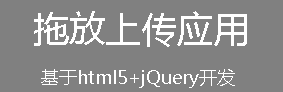
<style>
.page{position:relative;width:283px;height:92px;background:#808080}
.page>*{position:absolute;margin:0}
.t1{font:36px "MicrosoftYaHei";color:#ffffff}
.t2{font:18px "MicrosoftYaHei";color:#ffffff}
</style>
<div class="page">
<p class="t1" style="left:34px;top:11px;width:213px;height:36px">拖放上传应用</p>
<p class="t2" style="left:41px;top:69px;width:194px;height:19px">基于html5+jQuery开发</p>
</div>
